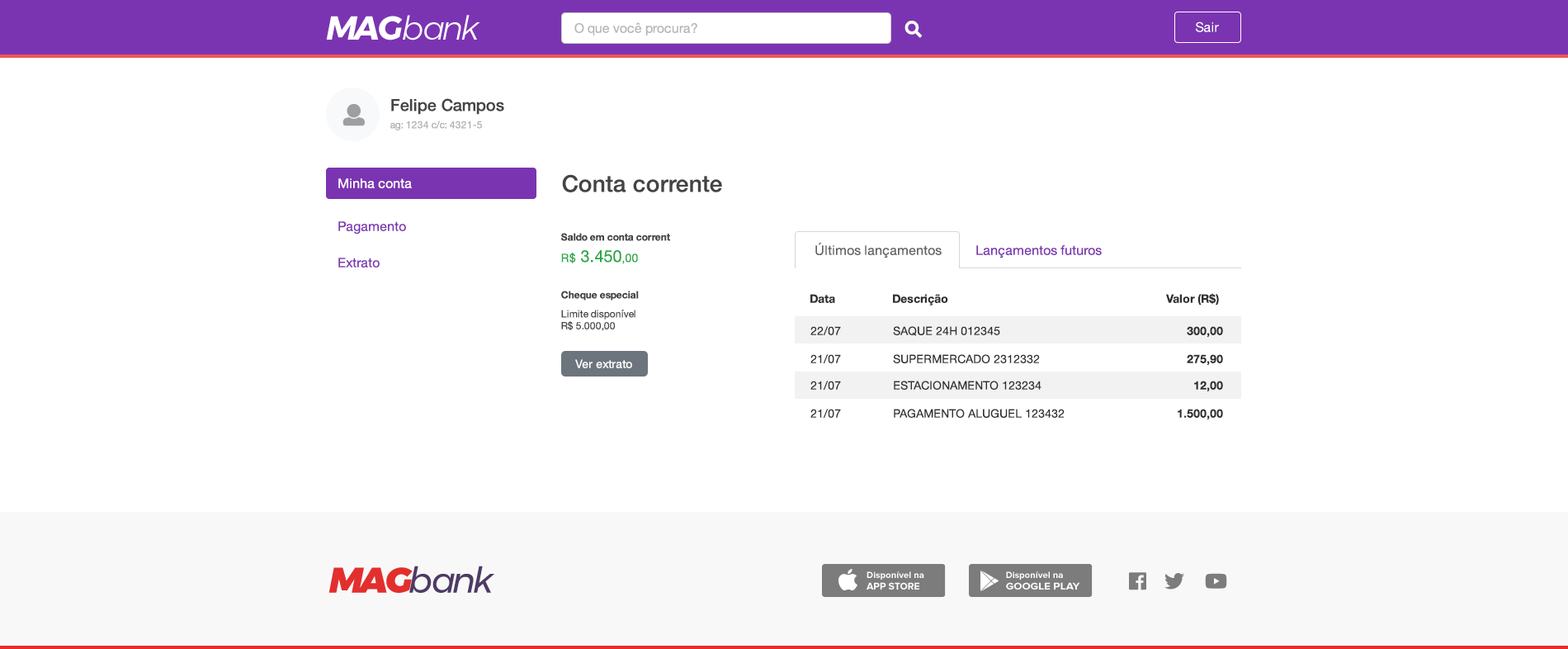
<style>
.page{position:relative;width:1568px;height:649px;background:#ffffff}
.page>*{position:absolute;margin:0}
.t1{font:33px "Montserrat-LightItalic";letter-spacing:-0.075em;color:#ffffff}
.t2{font:33px "Montserrat-BoldItalic";letter-spacing:-0.075em;color:#ffffff}
.t3{font:13.2px "HelveticaNeue";color:#b6b6b6}
.t4{font:13.2px "HelveticaNeue";color:#ffffff}
.t5{font:16.5px "HelveticaNeue-Medium";color:#444444}
.t6{font:9.9px "HelveticaNeue";color:#b1b1b1}
.t7{font:23.1px "HelveticaNeue-Medium";color:#444444}
.t8{font:13.2px "HelveticaNeue";color:#7b34b1}
.t9{font:9.9px "HelveticaNeue-Bold";color:#444444}
.t10{font:13.2px "HelveticaNeue";color:#626262}
.t11{font:16.5px "HelveticaNeue";color:#28a745}
.t12{font:11.6px "HelveticaNeue";color:#28a745}
.t13{font:11.6px "HelveticaNeue-Bold";color:#2f2f2f}
.t14{font:9.9px "HelveticaNeue";color:#444444}
.t15{font:11.6px "HelveticaNeue";color:#2f2f2f}
.t16{font:11.6px "HelveticaNeue";color:#ffffff}
.t17{font:35.8px "Montserrat-Italic";letter-spacing:-0.075em;color:#4e3a63}
.t18{font:35.8px "Montserrat-BlackItalic";letter-spacing:-0.075em;color:#e32e2e}
</style>
<div class="page">
<p class="t1" style="left:326px;top:15px;width:154px;height:25px"><span class="t2">MAG</span>bank</p>
<p class="t3" style="left:574px;top:22px;width:123px;height:13px">O que você procura?</p>
<p class="t4" style="left:1196px;top:21px;width:23px;height:11px">Sair</p>
<p class="t5" style="left:391px;top:98px;width:113px;height:17px">Felipe Campos</p>
<p class="t6" style="left:390px;top:120px;width:92px;height:10px">ag: 1234 c/c: 4321-5</p>
<p class="t4" style="left:338px;top:178px;width:74px;height:10px">Minha conta</p>
<p class="t7" style="left:562px;top:174px;width:160px;height:18px">Conta corrente</p>
<p class="t8" style="left:338px;top:221px;width:68px;height:13px">Pagamento</p>
<p class="t9" style="left:561px;top:233px;width:109px;height:8px">Saldo em conta corrent</p>
<p class="t10" style="left:815px;top:242px;width:127px;height:16px">Últimos lançamentos</p>
<p class="t8" style="left:976px;top:245px;width:126px;height:13px">Lançamentos futuros</p>
<p class="t8" style="left:338px;top:257px;width:42px;height:10px">Extrato</p>
<p class="t11" style="left:561px;top:250px;width:77px;height:14px"><span class="t12">R$ </span>3.450<span class="t12">,00</span></p>
<p class="t9" style="left:561px;top:290px;width:78px;height:10px">Cheque especial</p>
<p class="t13" style="left:810px;top:294px;width:25px;height:9px">Data</p>
<p class="t13" style="left:893px;top:294px;width:55px;height:11px">Descrição</p>
<p class="t13" style="left:1166px;top:293px;width:53px;height:12px">Valor (R$)</p>
<p class="t14" style="left:561px;top:309px;width:74px;height:22px">Limite disponível<br>R$ 5.000,00</p>
<p class="t15" style="left:810px;top:326px;width:31px;height:9px">22/07</p>
<p class="t15" style="left:893px;top:326px;width:107px;height:10px">SAQUE 24H 012345</p>
<p class="t13" style="left:1187px;top:326px;width:36px;height:11px">300,00</p>
<p class="t16" style="left:575px;top:359px;width:57px;height:9px">Ver extrato</p>
<p class="t15" style="left:810px;top:354px;width:31px;height:9px">21/07</p>
<p class="t15" style="left:893px;top:354px;width:147px;height:9px">SUPERMERCADO 2312332</p>
<p class="t13" style="left:1187px;top:354px;width:36px;height:11px">275,90</p>
<p class="t15" style="left:810px;top:380px;width:31px;height:10px">21/07</p>
<p class="t15" style="left:894px;top:380px;width:147px;height:10px">ESTACIONAMENTO 123234</p>
<p class="t13" style="left:1194px;top:380px;width:29px;height:11px">12,00</p>
<p class="t15" style="left:810px;top:409px;width:31px;height:9px">21/07</p>
<p class="t15" style="left:894px;top:409px;width:171px;height:9px">PAGAMENTO ALUGUEL 123432</p>
<p class="t13" style="left:1178px;top:409px;width:45px;height:10px">1.500,00</p>
<p class="t17" style="left:328px;top:565px;width:167px;height:28px"><span class="t18">MAG</span>bank</p>
</div>
